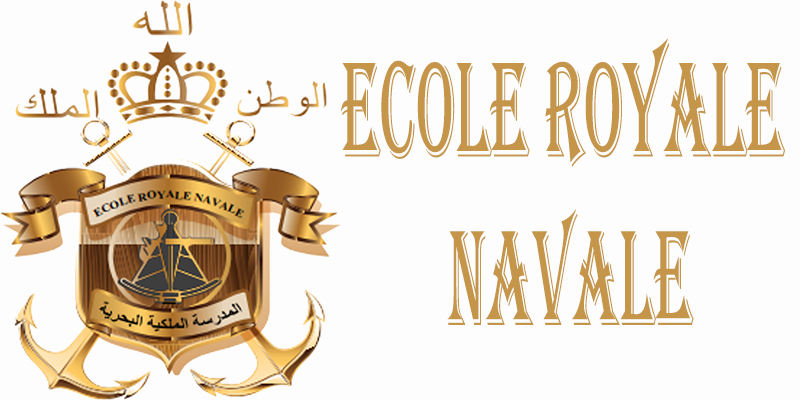
<style>
.page{position:relative;width:800px;height:400px;background:#fdfdfd}
.page>*{position:absolute;margin:0}
.t1{font:140.2px "Algerian";color:#c59649;scale:0.45 1}
</style>
<div class="page">
<p class="t1" style="left:340px;top:38px;width:445px;height:287px;text-align:center">Ecole Royale <br>Navale</p>
</div>
